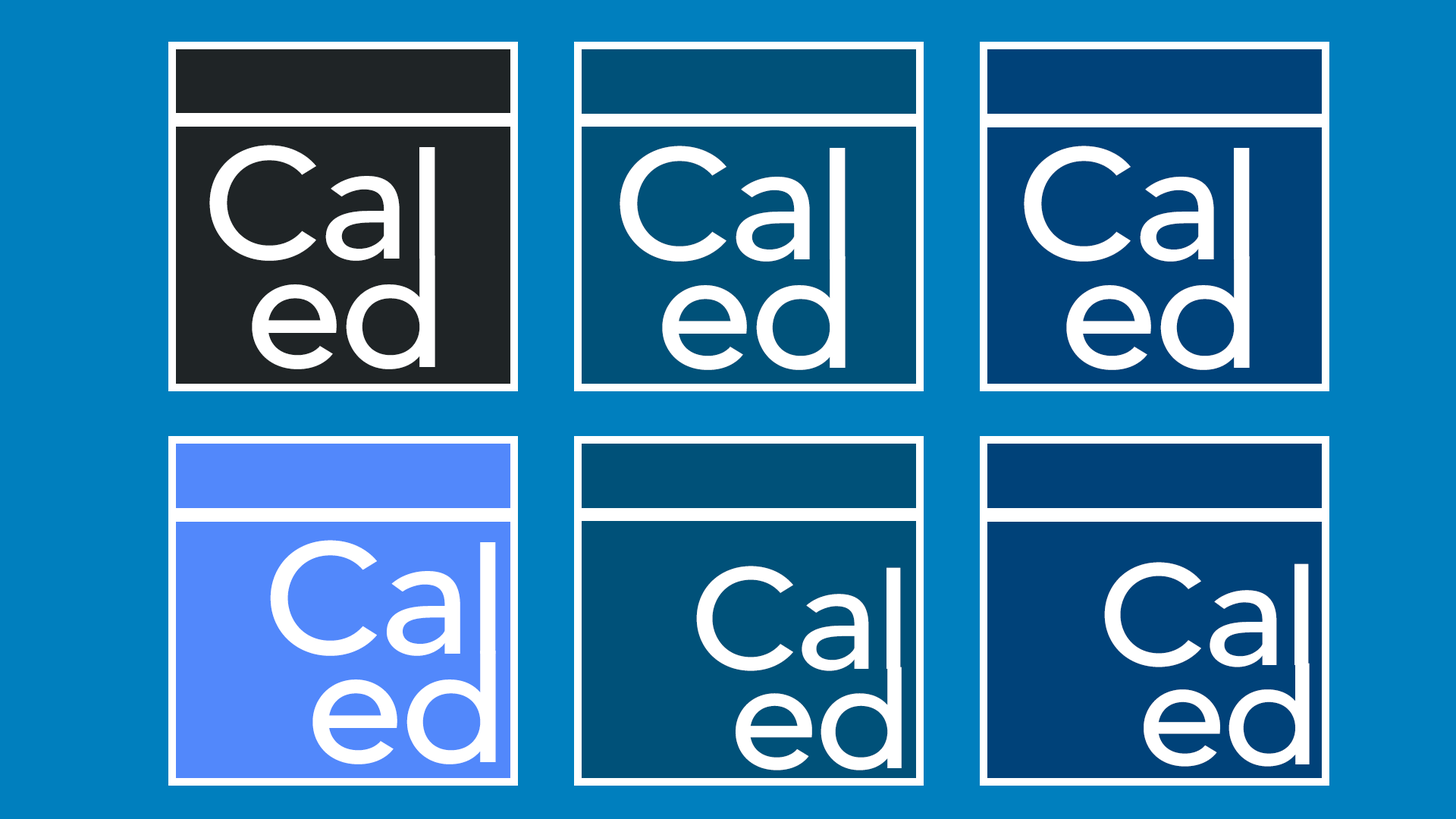
<style>
.page{position:relative;width:1456px;height:819px;background:#007fbe}
.page>*{position:absolute;margin:0}
.t1{font:159.1px "MADETOMMY";letter-spacing:-0.01em;color:#ffffff;scale:1.05 1}
.t2{font:144.1px "MADETOMMY";letter-spacing:-0.01em;color:#ffffff;scale:1.05 1}
</style>
<div class="page">
<p class="t1" style="left:209px;top:145px;width:226px;height:116px">Cal</p>
<p class="t1" style="left:620px;top:146px;width:226px;height:116px">Cal</p>
<p class="t1" style="left:1024px;top:146px;width:226px;height:116px">Cal</p>
<p class="t1" style="left:252px;top:256px;width:183px;height:113px">ed</p>
<p class="t1" style="left:662px;top:256px;width:184px;height:114px">ed</p>
<p class="t1" style="left:1066px;top:256px;width:184px;height:114px">ed</p>
<p class="t1" style="left:270px;top:540px;width:226px;height:116px">Cal</p>
<p class="t2" style="left:696px;top:566px;width:205px;height:105px">Cal</p>
<p class="t2" style="left:1104px;top:562px;width:205px;height:105px">Cal</p>
<p class="t1" style="left:312px;top:651px;width:184px;height:113px">ed</p>
<p class="t2" style="left:1144px;top:663px;width:166px;height:104px">ed</p>
<p class="t2" style="left:736px;top:667px;width:166px;height:103px">ed</p>
</div>
